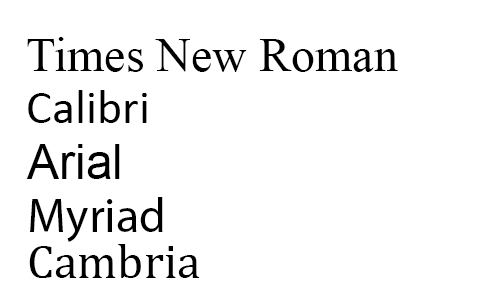
<style>
.page{position:relative;width:500px;height:300px;background:#ffffff}
.page>*{position:absolute;margin:0}
.t1{font:48px "TimesNewRomanPSMT";color:#000000}
.t2{font:48px "Calibri";color:#000000}
.t3{font:48px "ArialMT";color:#000000}
.t4{font:48px "MyriadPro-Regular";color:#000000}
.t5{font:48px "Cambria";color:#000000}
</style>
<div class="page">
<p class="t1" style="left:27px;top:37px;width:371px;height:35px">Times New Roman</p>
<p class="t2" style="left:28px;top:90px;width:119px;height:33px">Calibri</p>
<p class="t3" style="left:26px;top:144px;width:94px;height:35px">Arial</p>
<p class="t4" style="left:30px;top:197px;width:133px;height:45px">Myriad</p>
<p class="t5" style="left:29px;top:244px;width:171px;height:34px">Cambria</p>
</div>
